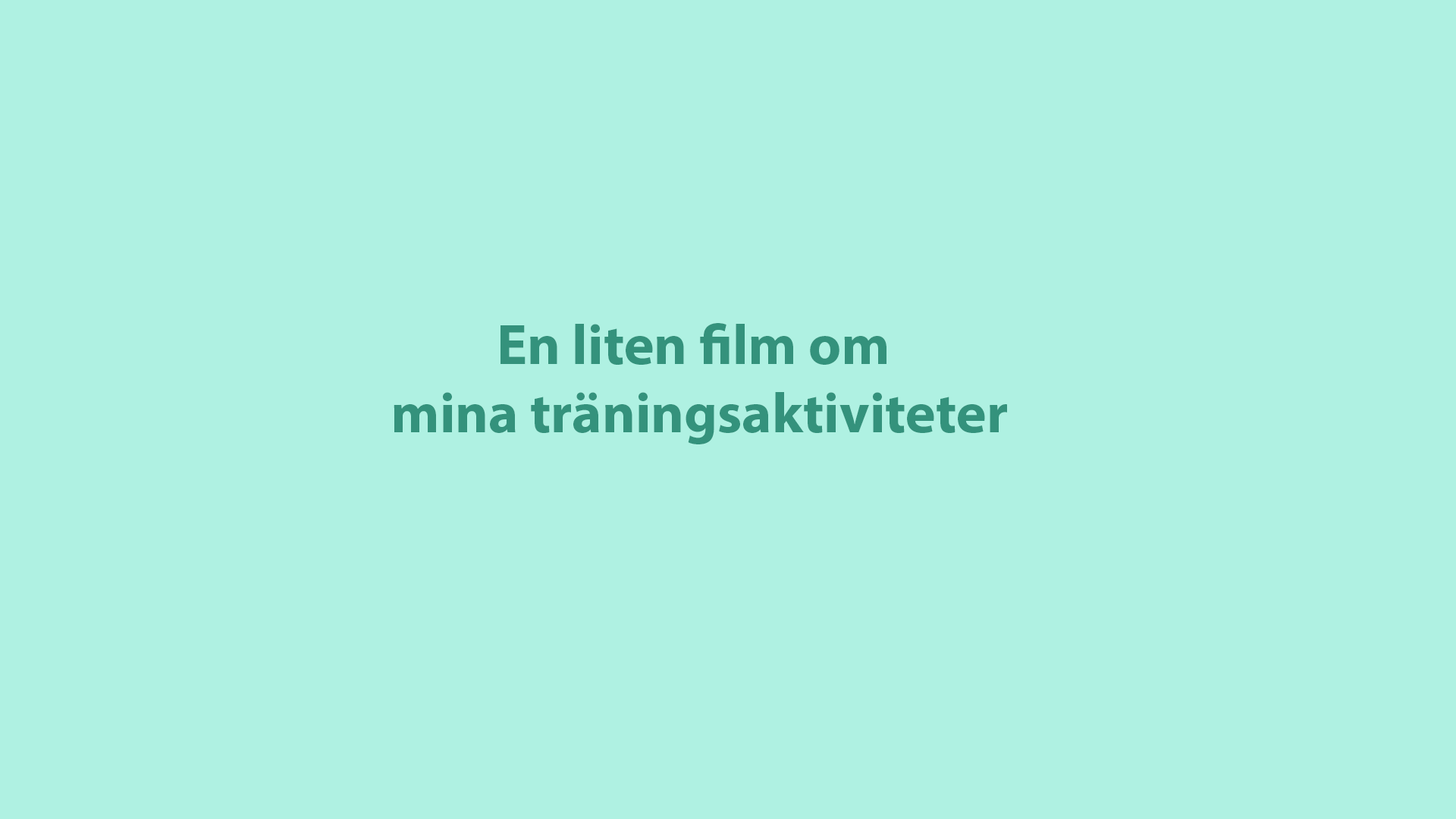
<style>
.page{position:relative;width:1456px;height:819px;background:#aff1e2}
.page>*{position:absolute;margin:0}
.t1{font:56.9px "MyriadPro-Bold";color:#34927c}
</style>
<div class="page">
<p class="t1" style="left:394px;top:323px;width:613px;height:121px;text-align:center">En liten film om<br> mina träningsaktiviteter</p>
</div>
